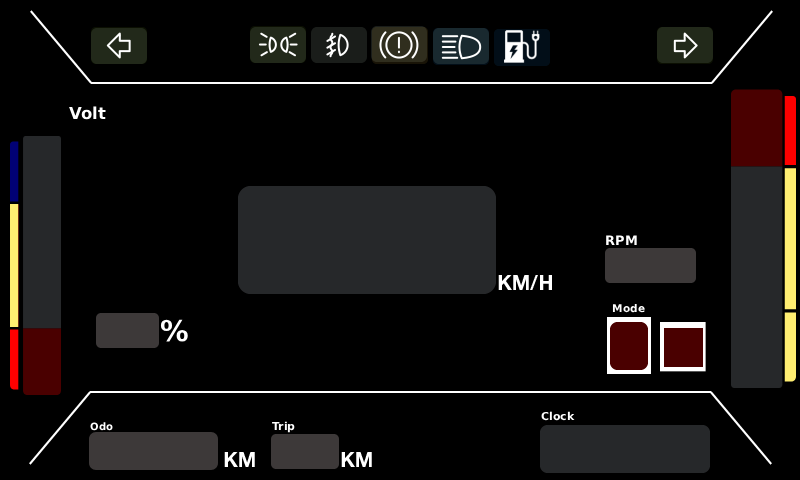
<style>
.page{position:relative;width:800px;height:480px;background:#000000}
.page>*{position:absolute;margin:0}
.t1{font:16.5px "BMWHelvetica-Bold";color:#ffffff}
.t2{font:12.9px "BMWHelvetica-Bold";color:#ffffff}
.t3{font:19px "BMWHelvetica-Bold";color:#ffffff}
.t4{font:10.5px "BMWHelvetica-Bold";color:#ffffff}
.t5{font:28.6px "BMWHelvetica-Bold";color:#ffffff}
.t6{font:10.9px "BMWHelvetica-Bold";color:#ffffff}
.t7{font:10.1px "BMWHelvetica-Bold";color:#ffffff}
</style>
<div class="page">
<p class="t1" style="left:69px;top:106px;width:37px;height:14px">Volt</p>
<p class="t1" style="left:69px;top:106px;width:37px;height:14px">Volt</p>
<p class="t2" style="left:606px;top:235px;width:31px;height:10px">RPM</p>
<p class="t2" style="left:606px;top:235px;width:31px;height:10px">RPM</p>
<p class="t3" style="left:498px;top:275px;width:54px;height:15px">KM/H</p>
<p class="t3" style="left:498px;top:275px;width:54px;height:15px">KM/H</p>
<p class="t4" style="left:612px;top:304px;width:33px;height:9px">Mode</p>
<p class="t4" style="left:612px;top:304px;width:33px;height:9px">Mode</p>
<p class="t5" style="left:160px;top:319px;width:28px;height:23px">%</p>
<p class="t5" style="left:160px;top:319px;width:28px;height:23px">%</p>
<p class="t6" style="left:541px;top:411px;width:34px;height:10px">Clock</p>
<p class="t6" style="left:541px;top:411px;width:34px;height:10px">Clock</p>
<p class="t7" style="left:90px;top:422px;width:23px;height:9px">Odo</p>
<p class="t7" style="left:90px;top:422px;width:23px;height:9px">Odo</p>
<p class="t6" style="left:272px;top:421px;width:23px;height:12px">Trip</p>
<p class="t6" style="left:272px;top:421px;width:23px;height:12px">Trip</p>
<p class="t3" style="left:224px;top:452px;width:31px;height:15px">KM</p>
<p class="t3" style="left:224px;top:452px;width:31px;height:15px">KM</p>
<p class="t3" style="left:341px;top:452px;width:31px;height:15px">KM</p>
<p class="t3" style="left:341px;top:452px;width:31px;height:15px">KM</p>
</div>
